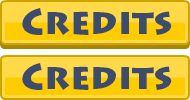
<style>
.page{position:relative;width:190px;height:100px;background:#ffd948}
.page>*{position:absolute;margin:0}
.t1{font:36px "LithosPro-Black";color:#3d4c6b}
</style>
<div class="page">
<p class="t1" style="left:22px;top:8px;width:150px;height:27px">Credits</p>
<p class="t1" style="left:22px;top:63px;width:150px;height:27px">Credits</p>
</div>
